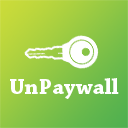
<style>
.page{position:relative;width:128px;height:128px}
.page>*{position:absolute;margin:0}
.t1{font:22.8px "ChaparralPro-Bold";color:#ffffff}
</style>
<div class="page">
<p class="t1" style="left:10px;top:78px;width:109px;height:21px">UnPaywall</p>
</div>
